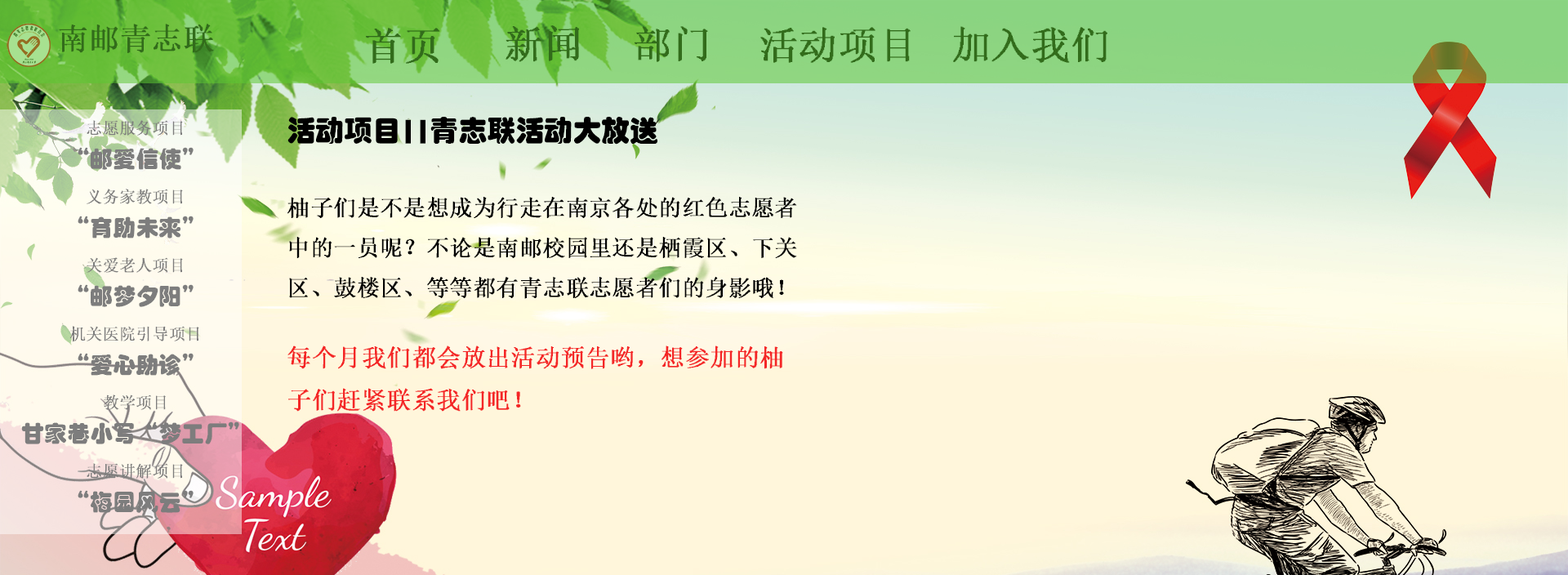
<style>
.page{position:relative;width:1568px;height:575px;background:#fff6db}
.page>*{position:absolute;margin:0}
.t1{font:31px "System";color:#326c1b}
.t2{font:39.2px "System";color:#326c1b}
.t3{font:22.9px "STHupo";color:#7d7d7d}
.t4{font:16.3px "System";color:#7d7d7d}
.t5{font:22.9px "System";color:#000000}
.t6{font:28.6px "STHupo";color:#000000}
.t7{font:24.5px "System";color:#f42626}
</style>
<div class="page">
<p class="t1" style="left:59px;top:24px;width:155px;height:29px">南邮青志联</p>
<p class="t2" style="left:366px;top:28px;width:74px;height:36px">首页</p>
<p class="t2" style="left:506px;top:25px;width:73px;height:37px;rotate:-1deg">新闻</p>
<p class="t2" style="left:635px;top:26px;width:73px;height:36px">部门</p>
<p class="t2" style="left:760px;top:27px;width:151px;height:36px">活动项目</p>
<p class="t2" style="left:953px;top:26px;width:154px;height:37px">加入我们</p>
<p class="t3" style="left:21px;top:120px;width:218px;height:393px;text-align:center"><span class="t4">志愿服务项目<br></span>“邮爱信使”<br><span class="t4">义务家教项目<br></span>“育助未来”<br><span class="t4">关爱老人项目<br></span>“邮梦夕阳”<br><span class="t4">机关医院引导项目<br></span>“爱心助诊”<br><span class="t4">教学项目<br></span>甘家巷小写“梦工厂”<br><span class="t4">志愿讲解项目<br></span>“梅园风云”</p>
<p class="t5" style="left:287px;top:117px;width:510px;height:295px"><span class="t6">活动项目||青志联活动大放送<br>     <br></span>柚子们是不是想成为行走在南京各处的红色志愿者中的一员呢？不论是南邮校园里还是栖霞区、下关区、鼓楼区、等等都有青志联志愿者们的身影哦！<br>   <br><span class="t7">每个月我们都会放出活动预告哟，想参加的柚子们赶紧联系我们吧！</span></p>
</div>
